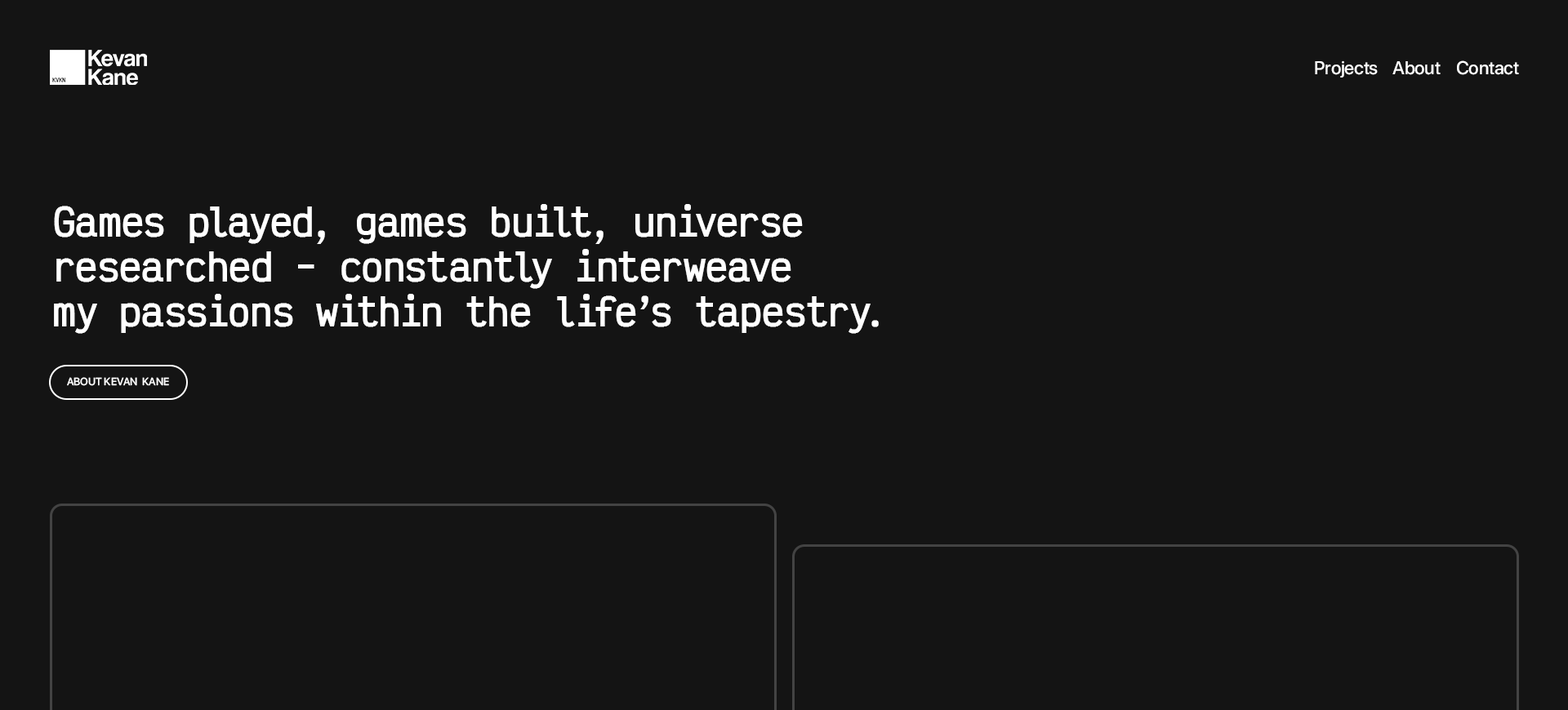
<style>
.page{position:relative;width:1568px;height:710px;background:#141414}
.page>*{position:absolute;margin:0}
.t1{font:18.6px "SFProDisplay-Medium";color:#ffffff}
.t2{font:40.8px/44.9px "VictorMono-Bold";color:#ffffff}
.t3{font:10.6px "SFProDisplay-Medium";color:#ffffff}
</style>
<div class="page">
<p class="t1" style="left:1315px;top:60px;width:63px;height:18px">Projects</p>
<p class="t1" style="left:1392px;top:61px;width:49px;height:14px">About</p>
<p class="t1" style="left:1457px;top:60px;width:62px;height:15px">Contact</p>
<p class="t2" style="left:54px;top:204px;width:825px;height:130px">Games played, games built, universe<br>researched - constantly interweave<br>my passions within the life’s tapestry.</p>
<p class="t3" style="left:67px;top:377px;width:102px;height:9px">ABOUT KEVAN  KANE</p>
</div>
